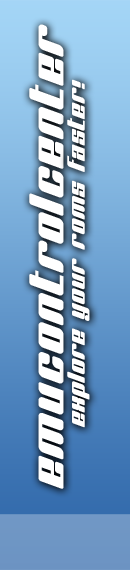
<style>
.page{position:relative;width:130px;height:570px}
.page>*{position:absolute;margin:0}
.t1{font:47px "BNJinx";letter-spacing:0.05em;color:#ffffff}
.t2{font:24px "BNJinx";letter-spacing:0.05em;color:#ffffff}
</style>
<div class="page">
<p class="t1" style="left:29px;top:24px;width:35px;height:465px;rotate:-90deg">emucontrolcenter</p>
<p class="t2" style="left:67px;top:79px;width:23px;height:349px;rotate:-90deg">explore your roms faster!</p>
</div>
